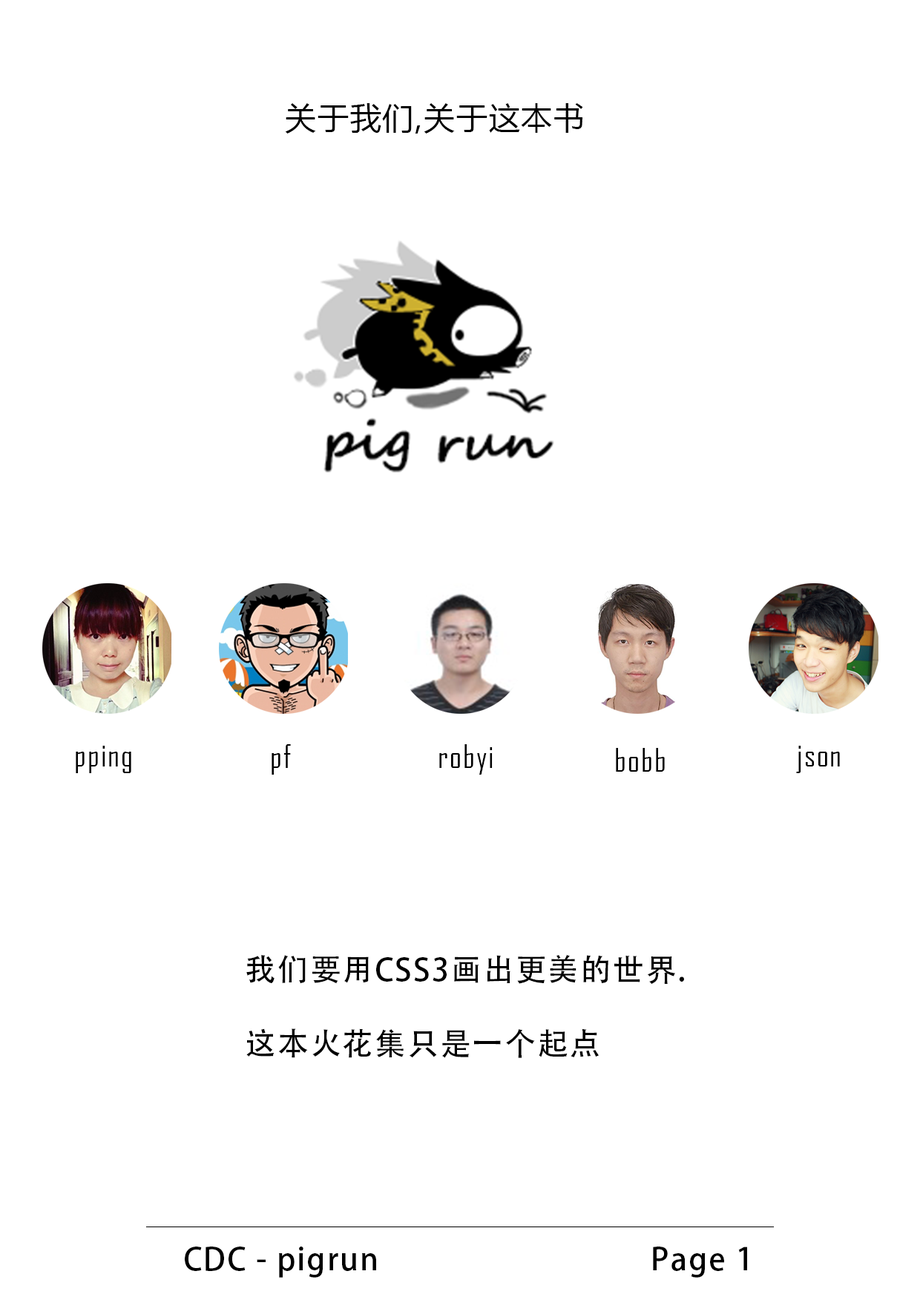
<style>
.page{position:relative;width:920px;height:1297px;background:#ffffff}
.page>*{position:absolute;margin:0}
.t1{font:30.9px "MicrosoftYaHei";letter-spacing:0.05em;color:#000000}
.t2{font:30.9px "AgencyFB-Reg";letter-spacing:0.05em;color:#000000}
.t3{font:30.9px/74.2px "AdobeHeitiStd-Regular";letter-spacing:0.05em;color:#000000}
.t4{font:30.9px "AdobeHeitiStd-Regular";letter-spacing:0.05em;color:#000000}
</style>
<div class="page">
<p class="t1" style="left:285px;top:103px;width:298px;height:31px">关于我们,关于这本书</p>
<p class="t2" style="left:76px;top:745px;width:55px;height:28px">pping</p>
<p class="t2" style="left:271px;top:744px;width:20px;height:30px">pf</p>
<p class="t2" style="left:439px;top:744px;width:53px;height:30px">robyi</p>
<p class="t2" style="left:616px;top:748px;width:49px;height:23px">bobb</p>
<p class="t2" style="left:796px;top:745px;width:44px;height:28px">json</p>
<p class="t3" style="left:246px;top:954px;width:438px;height:104px">我们要用CSS3画出更美的世界.<br>这本火花集只是一个起点</p>
<p class="t4" style="left:185px;top:1246px;width:562px;height:31px">CDC - pigrun                                Page 1</p>
</div>
